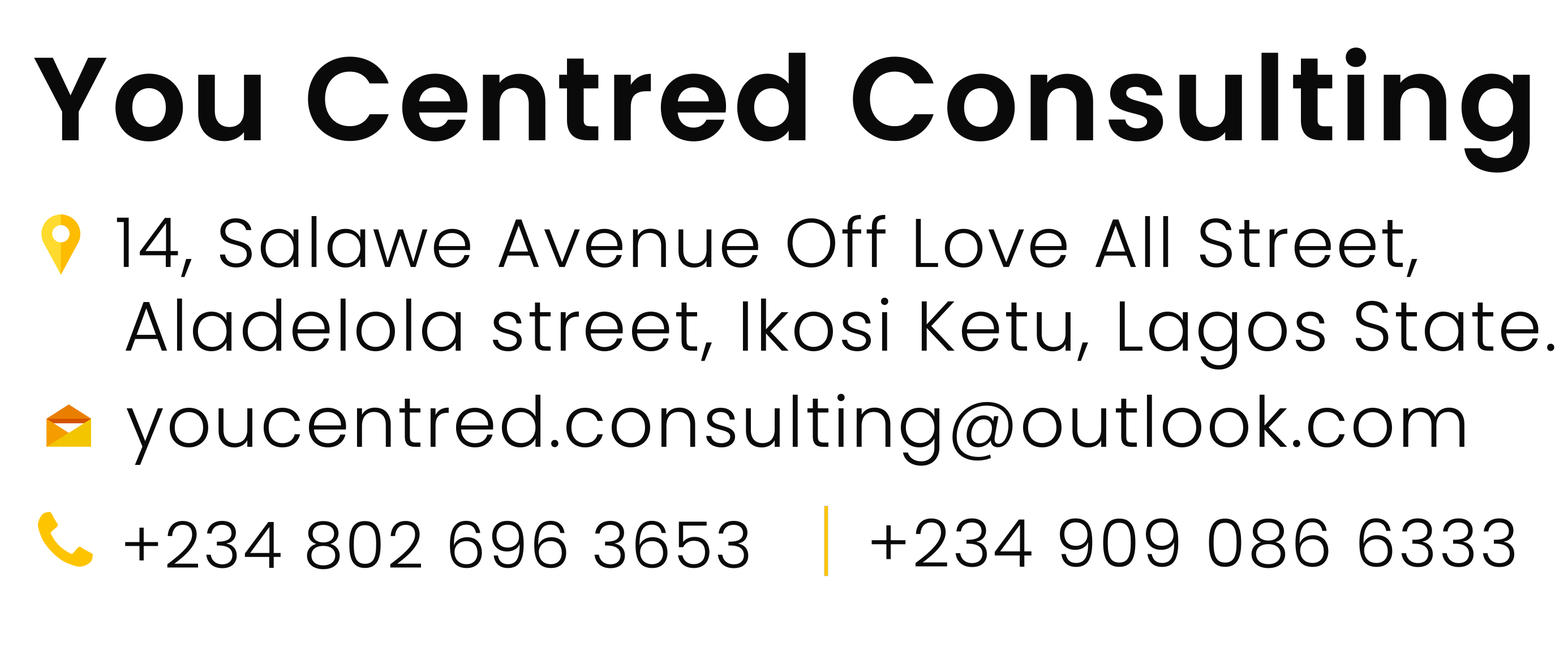
<style>
.page{position:relative;width:1568px;height:660px;background:#ffffff}
.page>*{position:absolute;margin:0}
.t1{font:118.2px "Poppins-SemiBold";letter-spacing:0.03em;color:#0a0a0a}
.t2{font:68.8px "Poppins-Light";letter-spacing:0.03em;color:#0a0a0a}
.t3{font:70.4px "Poppins-Light";letter-spacing:0.03em;color:#0a0a0a}
.t4{font:64.3px "Poppins-Light";letter-spacing:0.03em;color:#0a0a0a}
.t5{font:66.2px "Poppins-Light";letter-spacing:0.03em;color:#0a0a0a}
</style>
<div class="page">
<p class="t1" style="left:34px;top:48px;width:1496px;height:125px">You Centred Consulting</p>
<p class="t2" style="left:117px;top:215px;width:1300px;height:62px">14, Salawe Avenue Off Love All Street,</p>
<p class="t3" style="left:125px;top:298px;width:1429px;height:72px">Aladelola street, Ikosi Ketu, Lagos State.</p>
<p class="t3" style="left:126px;top:394px;width:1338px;height:72px">youcentred.consulting@outlook.com</p>
<p class="t4" style="left:125px;top:521px;width:624px;height:49px">+234 802 696 3653</p>
<p class="t5" style="left:871px;top:518px;width:644px;height:51px">+234 909 086 6333</p>
</div>
